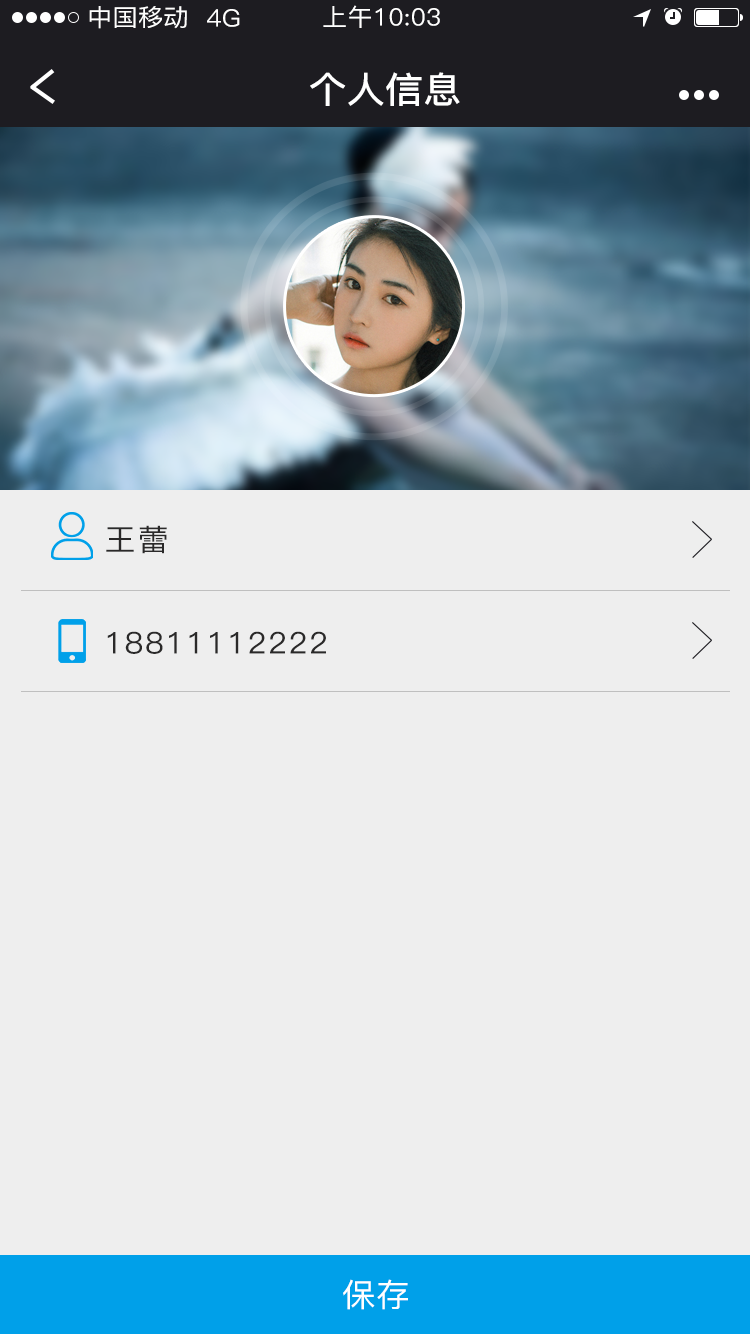
<style>
.page{position:relative;width:750px;height:1334px;background:#eeeeee}
.page>*{position:absolute;margin:0}
.t1{font:24px "PingFang-SC-Medium";letter-spacing:0.01em;color:#ffffff;scale:1.05 1}
.t2{font:36px "PingFang-SC-Bold";letter-spacing:0.01em;color:#ffffff;scale:1.05 1}
.t3{font:30px "PingFang-SC-Medium";letter-spacing:0.05em;color:#2a2929;scale:1.05 1}
.t4{font:32px "PingFang-SC-Medium";letter-spacing:0.01em;color:#ffffff;scale:1.05 1}
</style>
<div class="page">
<p class="t1" style="left:89px;top:6px;width:98px;height:23px">中国移动</p>
<p class="t1" style="left:323px;top:5px;width:117px;height:23px">上午10:03</p>
<p class="t1" style="left:207px;top:9px;width:33px;height:18px">4G</p>
<p class="t2" style="left:310px;top:72px;width:150px;height:34px">个人信息</p>
<p class="t3" style="left:106px;top:525px;width:61px;height:29px">王蕾</p>
<p class="t3" style="left:107px;top:631px;width:219px;height:23px">18811112222</p>
<p class="t4" style="left:343px;top:1279px;width:65px;height:31px">保存</p>
</div>
